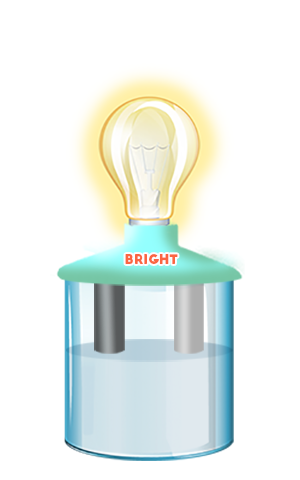
<style>
.page{position:relative;width:300px;height:480px;background:#ffffff}
.page>*{position:absolute;margin:0}
.t1{font:13px "BigJohn";color:#fb6542}
</style>
<div class="page">
<p class="t1" style="left:125px;top:254px;width:53px;height:10px">Bright</p>
</div>
